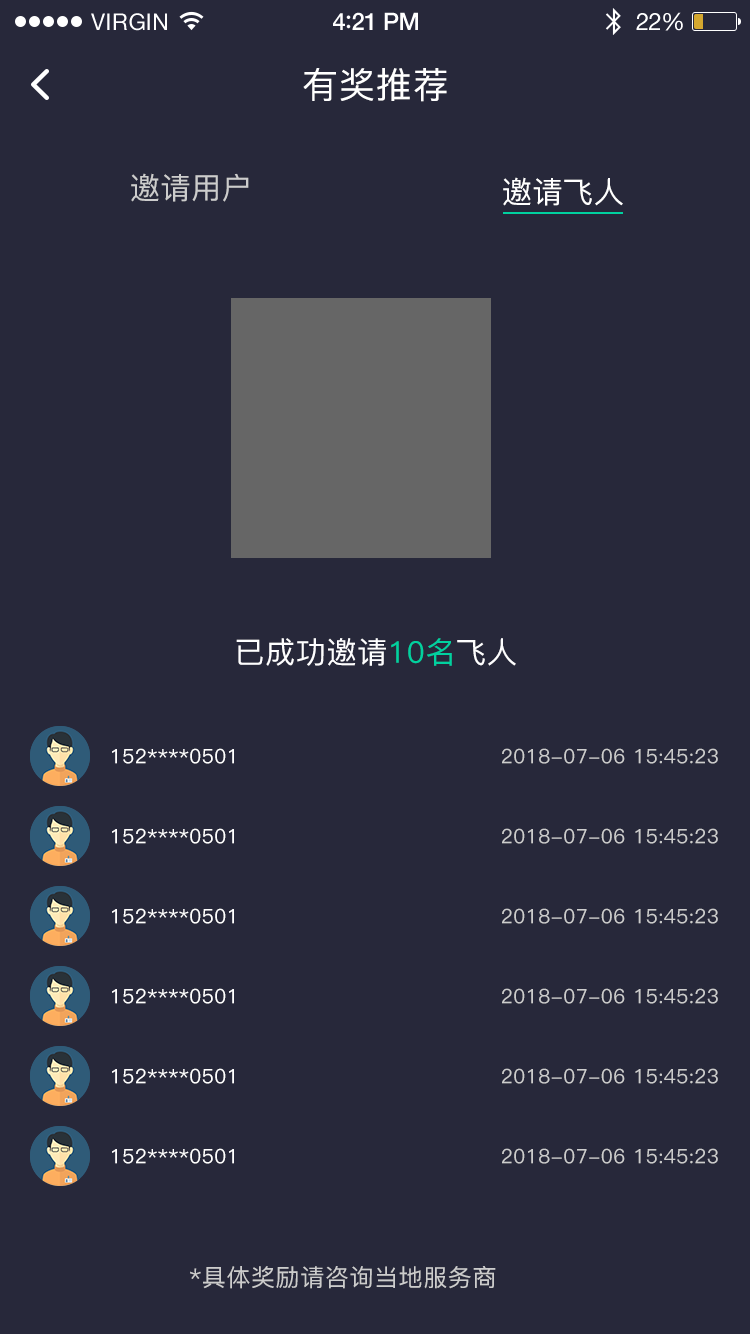
<style>
.page{position:relative;width:750px;height:1334px;background:#27283a}
.page>*{position:absolute;margin:0}
.t1{font:23px "HelveticaNeue";letter-spacing:0.02em;color:#ffffff}
.t2{font:24px "HelveticaNeue-Medium";letter-spacing:-0.02em;color:#ffffff}
.t3{font:26px "Avenir-Medium";letter-spacing:-0.02em;color:#ffffff}
.t4{font:24px "HelveticaNeue";letter-spacing:-0.02em;color:#ffffff}
.t5{font:36px "PingFang-SC-Medium";letter-spacing:0.025em;color:#ffffff}
.t6{font:30px "PingFang-SC-Medium";letter-spacing:0.025em;color:#cccccc}
.t7{font:30px "PingFang-SC-Medium";letter-spacing:0.025em;color:#ffffff}
.t8{font:30px "PingFang-SC-Medium";letter-spacing:0.025em;color:#fefeff}
.t9{font:30px "PingFang-SC-Medium";letter-spacing:0.025em;color:#01d19f}
.t10{font:20px "PingFang-SC-Medium";letter-spacing:0.025em;color:#ffffff}
.t11{font:20px "PingFang-SC-Medium";letter-spacing:0.025em;color:#cccccc}
.t12{font:24px "PingFang-SC-Medium";letter-spacing:0.025em;color:#cccccc}
</style>
<div class="page">
<p class="t1" style="left:91px;top:13px;width:76px;height:18px">VIRGIN</p>
<p class="t2" style="left:333px;top:12px;width:85px;height:18px">4<span class="t3">:</span>21 PM</p>
<p class="t4" style="left:636px;top:12px;width:47px;height:19px">22%</p>
<p class="t5" style="left:303px;top:68px;width:144px;height:34px">有奖推荐</p>
<p class="t6" style="left:131px;top:173px;width:118px;height:29px">邀请用户</p>
<p class="t7" style="left:503px;top:177px;width:120px;height:29px">邀请飞人</p>
<p class="t8" style="left:236px;top:638px;width:280px;height:28px">已成功邀请<span class="t9">10名</span>飞人</p>
<p class="t10" style="left:112px;top:748px;width:122px;height:16px">152****0501</p>
<p class="t11" style="left:502px;top:748px;width:216px;height:16px">2018-07-06 15:45:23</p>
<p class="t10" style="left:112px;top:828px;width:122px;height:16px">152****0501</p>
<p class="t11" style="left:502px;top:828px;width:216px;height:16px">2018-07-06 15:45:23</p>
<p class="t10" style="left:112px;top:908px;width:122px;height:16px">152****0501</p>
<p class="t11" style="left:502px;top:908px;width:216px;height:16px">2018-07-06 15:45:23</p>
<p class="t10" style="left:112px;top:988px;width:122px;height:16px">152****0501</p>
<p class="t11" style="left:502px;top:988px;width:216px;height:16px">2018-07-06 15:45:23</p>
<p class="t10" style="left:112px;top:1068px;width:122px;height:16px">152****0501</p>
<p class="t11" style="left:502px;top:1068px;width:216px;height:16px">2018-07-06 15:45:23</p>
<p class="t10" style="left:112px;top:1148px;width:122px;height:16px">152****0501</p>
<p class="t11" style="left:502px;top:1148px;width:216px;height:16px">2018-07-06 15:45:23</p>
<p class="t12" style="left:190px;top:1266px;width:306px;height:23px">*具体奖励请咨询当地服务商</p>
</div>
